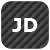
<style>
.page{position:relative;width:50px;height:50px}
.page>*{position:absolute;margin:0}
.t1{font:19px "Verdana-Bold";color:#ffffff}
</style>
<div class="page">
<p class="t1" style="left:12px;top:18px;width:26px;height:14px">JD</p>
</div>
